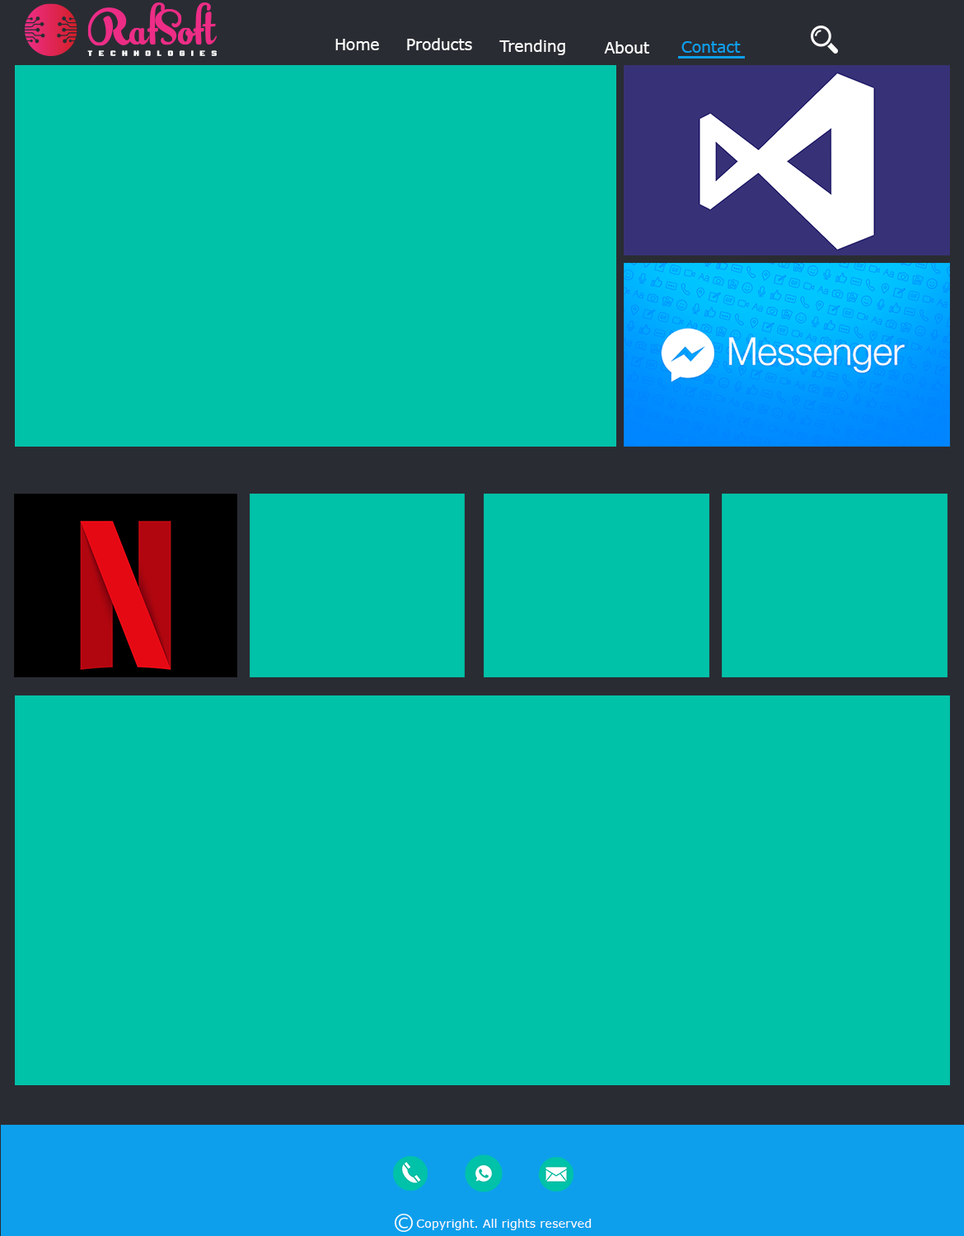
<style>
.page{position:relative;width:964px;height:1236px;background:#00c2a9}
.page>*{position:absolute;margin:0}
.t1{font:15.7px "Verdana";color:#fcfcfc}
.t2{font:15.7px "Verdana";color:#ffffff}
.t3{font:15.7px "Verdana";color:#0d9fec}
.t4{font:11.6px "Verdana";color:#fcfcfd}
</style>
<div class="page">
<p class="t1" style="left:335px;top:39px;width:44px;height:11px">Home</p>
<p class="t1" style="left:407px;top:38px;width:65px;height:12px">Products</p>
<p class="t1" style="left:500px;top:40px;width:65px;height:15px">Trending</p>
<p class="t2" style="left:604px;top:41px;width:46px;height:13px">About</p>
<p class="t3" style="left:682px;top:41px;width:59px;height:12px">Contact</p>
<p class="t4" style="left:416px;top:1219px;width:176px;height:12px">Copyright. All rights reserved</p>
</div>
